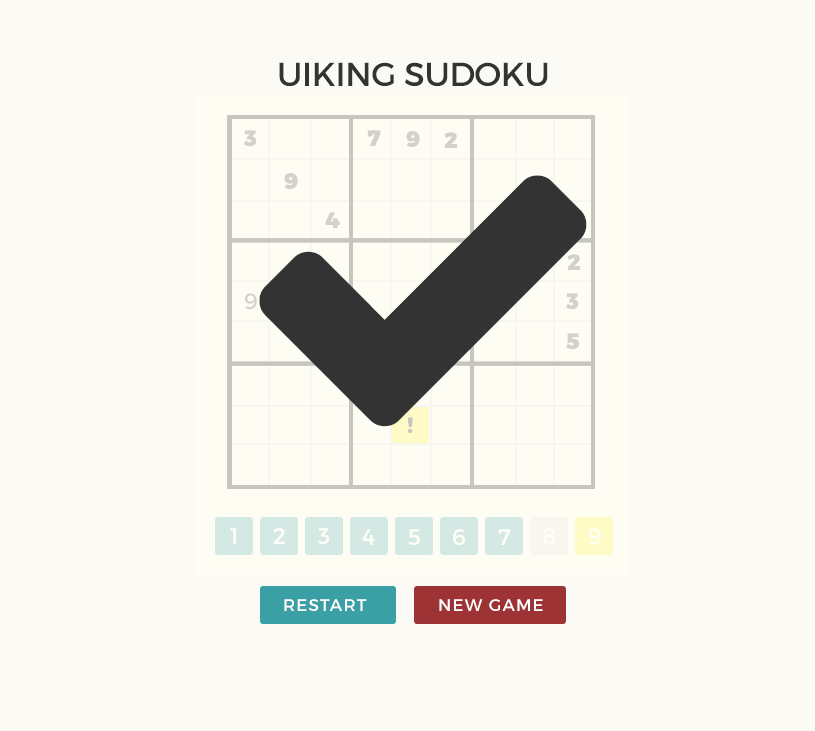
<style>
.page{position:relative;width:815px;height:731px;background:#fbfaf4}
.page>*{position:absolute;margin:0}
.t1{font:33.3px "Montserrat-Regular";letter-spacing:-0.01em;color:#333333}
.t2{font:22.2px "Montserrat-Black";letter-spacing:-0.01em;color:#d2d1ca}
.t3{font:22.2px "Montserrat-Regular";letter-spacing:-0.01em;color:#d2d1ca}
.t4{font:22.2px "Montserrat-Black";letter-spacing:-0.01em;color:#c7c6be}
.t5{font:22.2px "Montserrat-Regular";letter-spacing:-0.01em;color:#ffffff}
.t6{font:16.7px "Montserrat-Regular";letter-spacing:0.075em;color:#fefefe;text-transform:uppercase}
</style>
<div class="page">
<p class="t1" style="left:279px;top:62px;width:269px;height:25px">UIKING SUDOKU</p>
<p class="t2" style="left:243px;top:130px;width:14px;height:17px">3</p>
<p class="t2" style="left:243px;top:130px;width:14px;height:17px">3</p>
<p class="t2" style="left:367px;top:130px;width:14px;height:16px">7</p>
<p class="t2" style="left:406px;top:131px;width:14px;height:16px">9</p>
<p class="t2" style="left:444px;top:132px;width:13px;height:16px">2</p>
<p class="t2" style="left:284px;top:173px;width:14px;height:16px">9</p>
<p class="t2" style="left:325px;top:212px;width:15px;height:16px">4</p>
<p class="t2" style="left:567px;top:254px;width:13px;height:16px">2</p>
<p class="t3" style="left:245px;top:293px;width:12px;height:17px">9</p>
<p class="t2" style="left:565px;top:293px;width:14px;height:17px">3</p>
<p class="t2" style="left:565px;top:293px;width:14px;height:17px">3</p>
<p class="t2" style="left:566px;top:333px;width:13px;height:17px">5</p>
<p class="t4" style="left:408px;top:417px;width:5px;height:17px">!</p>
<p class="t5" style="left:230px;top:528px;width:6px;height:16px">1</p>
<p class="t5" style="left:273px;top:528px;width:12px;height:16px">2</p>
<p class="t5" style="left:318px;top:528px;width:11px;height:16px">3</p>
<p class="t5" style="left:362px;top:529px;width:13px;height:16px">4</p>
<p class="t5" style="left:408px;top:529px;width:12px;height:16px">5</p>
<p class="t5" style="left:453px;top:529px;width:12px;height:16px">6</p>
<p class="t5" style="left:498px;top:529px;width:13px;height:16px">7</p>
<p class="t5" style="left:543px;top:528px;width:12px;height:16px">8</p>
<p class="t5" style="left:589px;top:528px;width:12px;height:17px">9</p>
<p class="t6" style="left:284px;top:599px;width:83px;height:12px">Restart</p>
<p class="t6" style="left:439px;top:599px;width:104px;height:12px">NEW GAME</p>
</div>
